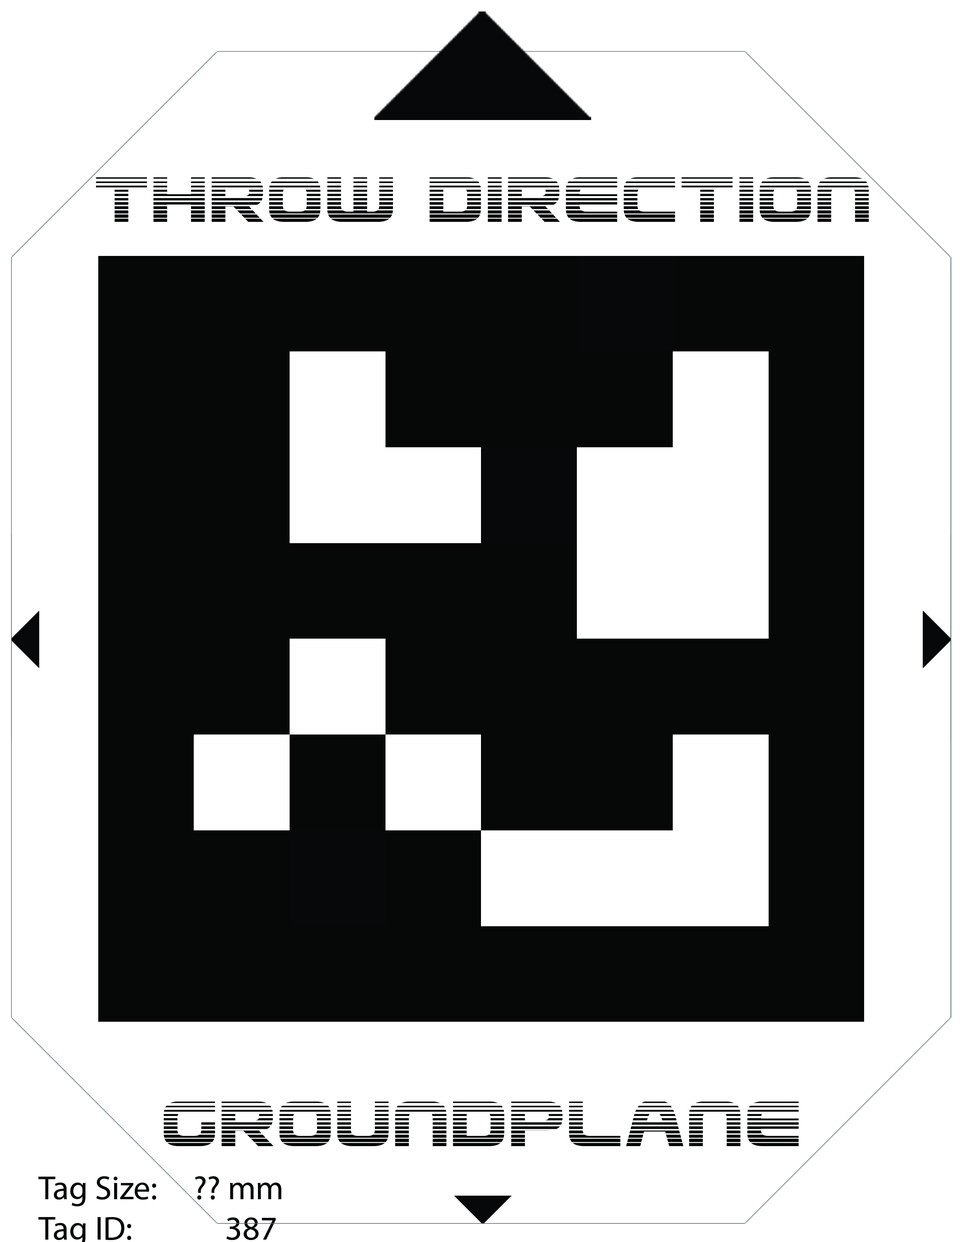
<style>
.page{position:relative;width:960px;height:1242px;background:#ffffff}
.page>*{position:absolute;margin:0}
.t1{font:77px "UsuziGradient";color:#060808}
</style>
<div class="page">
<p class="t1" style="left:96px;top:177px;width:773px;height:45px">Throw Direction</p>
<p class="t1" style="left:164px;top:1101px;width:635px;height:45px">groundplane</p>
</div>
